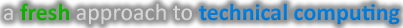
<style>
.page{position:relative;width:403px;height:28px}
.page>*{position:absolute;margin:0}
.t1{font:24px "Calibri-Bold";color:#017cdb}
.t2{font:24px "Calibri";color:#d8d8d8}
.t3{font:24px "Calibri-Bold";color:#11b100}
.t4{font:24px "Calibri";color:#d7d7d7}
</style>
<div class="page">
<p class="t1" style="left:4px;top:3px;width:396px;height:22px"><span class="t2">a </span><span class="t3">fresh </span><span class="t4">approach to </span>technical computing</p>
</div>
